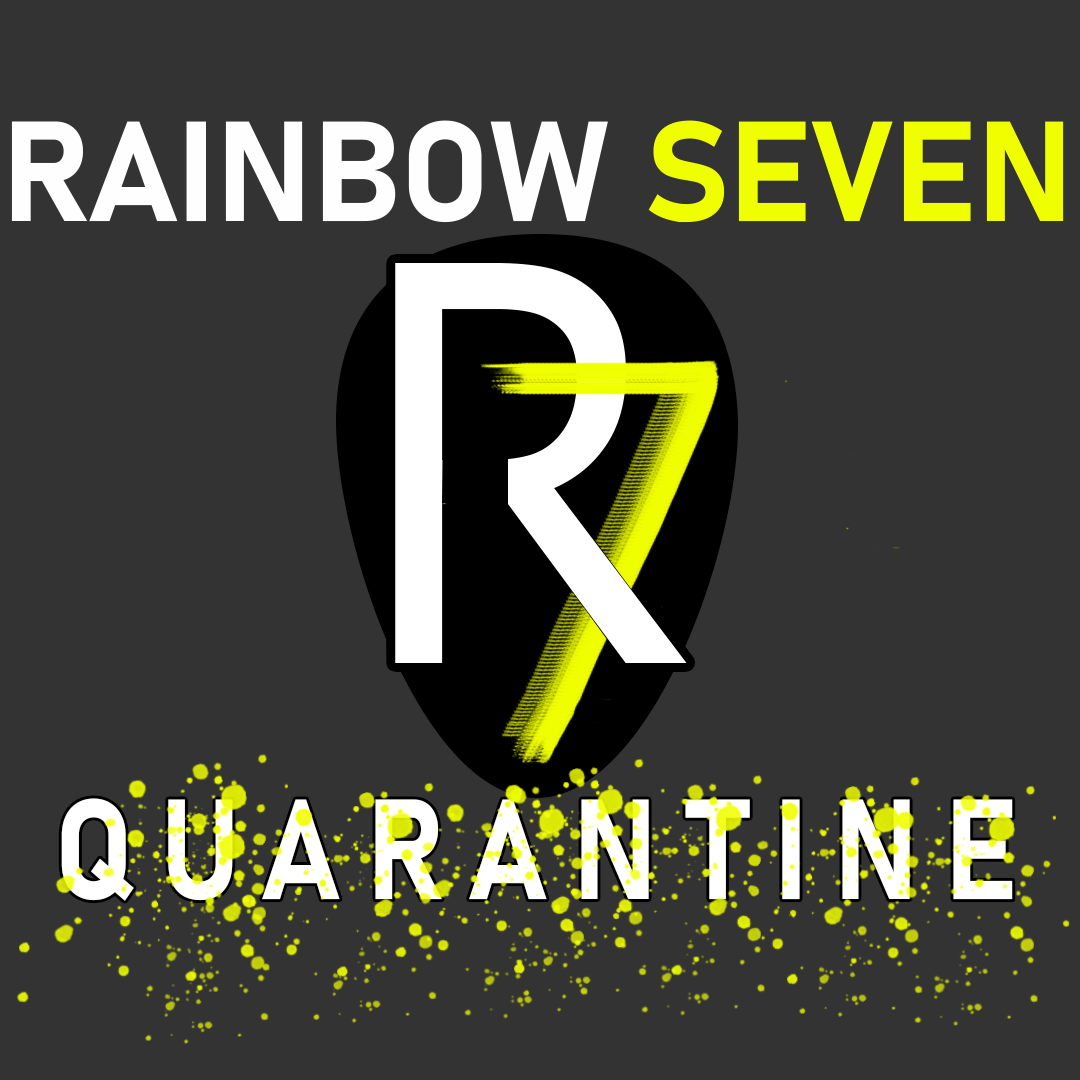
<style>
.page{position:relative;width:1080px;height:1080px;background:#333333}
.page>*{position:absolute;margin:0}
.t1{font:140px "Bahnschrift-Bold";letter-spacing:-0.005em;color:#fefefe}
.t2{font:140px "Bahnschrift-Bold";letter-spacing:-0.005em;color:#f0ff00}
.t3{font:140px "Bahnschrift-Bold";letter-spacing:0.2em;color:#ffffff;scale:0.88 1}
</style>
<div class="page">
<p class="t1" style="left:11px;top:120px;width:1053px;height:103px">RAINBOW <span class="t2">SEVEN</span></p>
<p class="t3" style="left:61px;top:798px;width:952px;height:103px">QUARANTINE</p>
</div>
